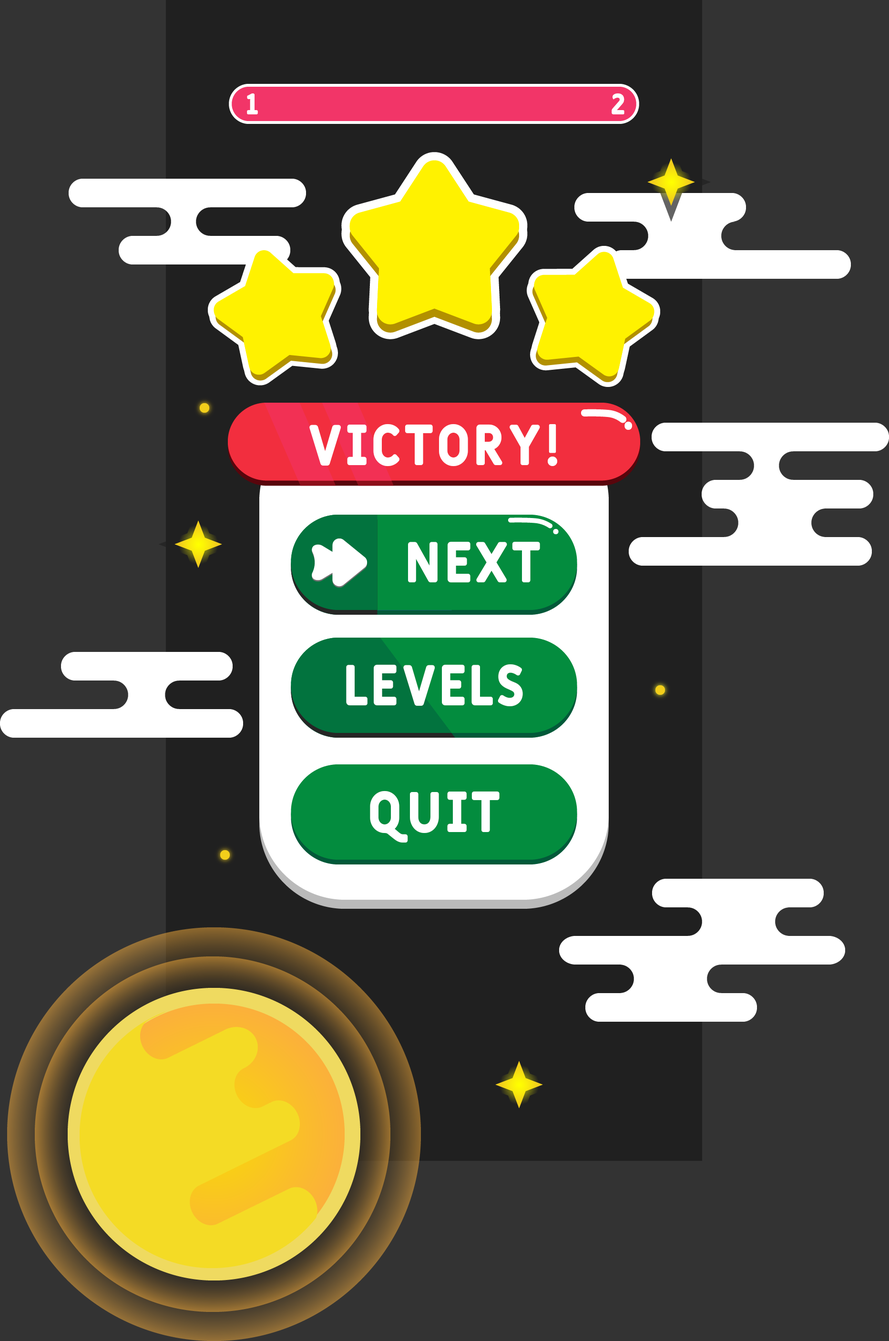
<style>
.page{position:relative;width:889px;height:1341px;background:#333333}
.page>*{position:absolute;margin:0}
.t1{font:28.6px "Fulbo-Argenta";color:#ffffff}
.t2{font:57.2px "Fulbo-Argenta";color:#ffffff}
</style>
<div class="page">
<p class="t1" style="left:247px;top:93px;width:11px;height:21px">1</p>
<p class="t1" style="left:612px;top:93px;width:12px;height:21px">2</p>
<p class="t2" style="left:309px;top:424px;width:248px;height:43px">Victory!</p>
<p class="t2" style="left:408px;top:541px;width:132px;height:42px">Next</p>
<p class="t2" style="left:346px;top:664px;width:177px;height:42px">Levels</p>
<p class="t2" style="left:370px;top:791px;width:130px;height:52px">Quit</p>
</div>
